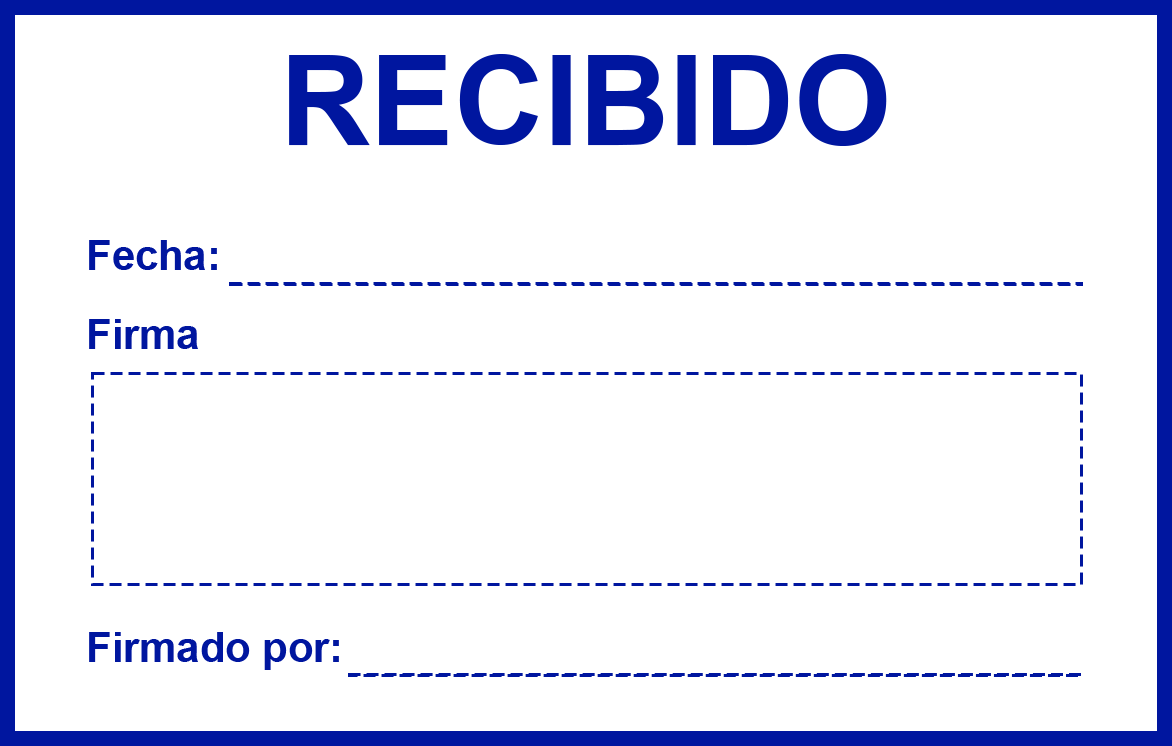
<style>
.page{position:relative;width:1172px;height:746px;background:#ffffff}
.page>*{position:absolute;margin:0}
.t1{font:125px "Arial-BoldMT";color:#00169f}
.t2{font:41.7px/79.2px "Arial-BoldMT";color:#00169f}
.t3{font:41.7px/66.7px "Arial-BoldMT";color:#00169f}
</style>
<div class="page">
<p class="t1" style="left:289px;top:54px;width:598px;height:92px">RECIBIDO</p>
<p class="t2" style="left:89px;top:240px;width:250px;height:430px">Fecha:<br>Firma<br><br><br><br><br><span class="t3">Firmado por:</span></p>
</div>
